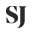
<style>
.page{position:relative;width:32px;height:32px;background:#ffffff}
.page>*{position:absolute;margin:0}
.t1{font:24px "NoeDisplay-Bold";color:#2a2a2a}
</style>
<div class="page">
<p class="t1" style="left:6px;top:6px;width:21px;height:22px">SJ</p>
</div>
